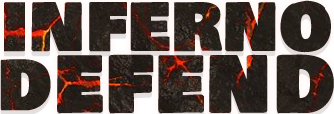
<style>
.page{position:relative;width:334px;height:114px}
.page>*{position:absolute;margin:0}
.t1{font:74.5px/58.3px "BowlbyOneSC-Regular";letter-spacing:0.01em;color:#29201a}
.t2{font:74.5px/58.3px "BowlbyOneSC-Regular";letter-spacing:0.025em;color:#29201a;font-weight:bold}
</style>
<div class="page">
<p class="t1" style="left:0px;top:0px;width:334px;height:114px;text-align:center">inferno<br><span class="t2">dEFEND</span></p>
</div>
